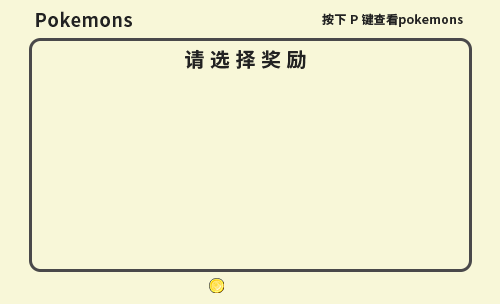
<style>
.page{position:relative;width:500px;height:304px;background:#f8f7d8}
.page>*{position:absolute;margin:0}
.t1{font:18px "SourceHanSansCN-Bold";letter-spacing:0.03em;color:#222222}
.t2{font:12px "SourceHanSansCN-Bold";letter-spacing:0.03em;color:#222222}
.t3{font:20px "SourceHanSansCN-Bold";letter-spacing:0.28em;color:#222222}
</style>
<div class="page">
<p class="t1" style="left:36px;top:11px;width:96px;height:16px">Pokemons</p>
<p class="t2" style="left:322px;top:13px;width:141px;height:14px">按下 P 键查看pokemons</p>
<p class="t3" style="left:185px;top:49px;width:121px;height:20px">请选择奖励</p>
</div>
